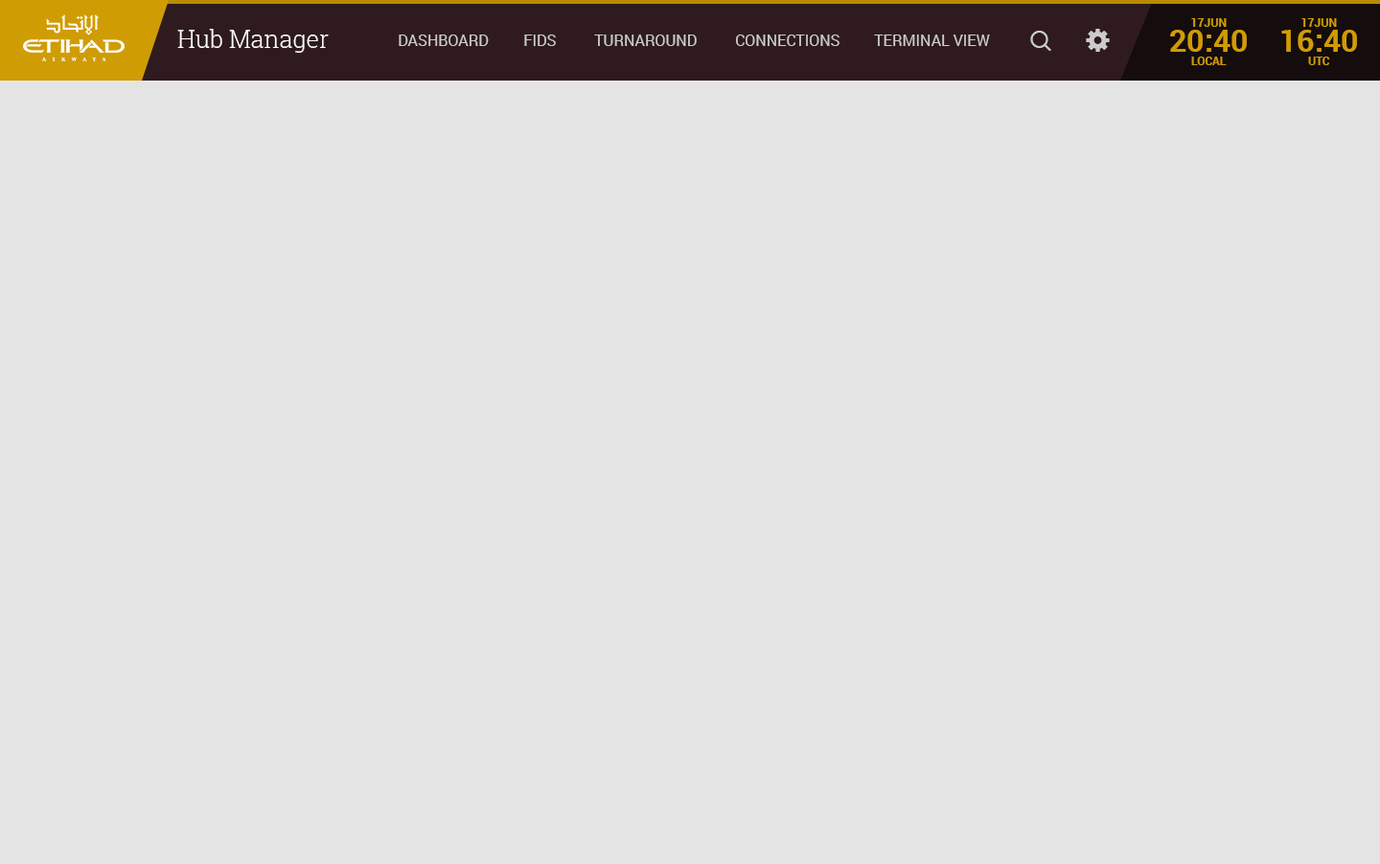
<style>
.page{position:relative;width:1380px;height:864px;background:#e4e4e4}
.page>*{position:absolute;margin:0}
.t1{font:24px "RobotoSlab-Light";color:#ffffff}
.t2{font:30.7px "Roboto-Bold";color:#d09c04}
.t3{font:11.5px "Roboto-Bold";color:#d09c04;text-transform:uppercase}
.t4{font:15.3px "Roboto-Regular";color:#cccccc;text-transform:uppercase}
.t5{font:11.5px "Roboto-Bold";color:#d09c04}
</style>
<div class="page">
<p class="t1" style="left:177px;top:29px;width:152px;height:24px">Hub Manager</p>
<p class="t2" style="left:1171px;top:30px;width:76px;height:22px">20:40</p>
<p class="t3" style="left:1192px;top:18px;width:35px;height:9px">17Jun</p>
<p class="t2" style="left:1282px;top:30px;width:75px;height:22px">16:40</p>
<p class="t3" style="left:1302px;top:18px;width:35px;height:9px">17Jun</p>
<p class="t4" style="left:399px;top:35px;width:90px;height:11px">Dashboard</p>
<p class="t4" style="left:524px;top:35px;width:32px;height:11px">FIDS</p>
<p class="t4" style="left:594px;top:35px;width:103px;height:11px">Turnaround</p>
<p class="t4" style="left:736px;top:35px;width:104px;height:11px">Connections</p>
<p class="t4" style="left:874px;top:35px;width:116px;height:11px">Terminal View</p>
<p class="t3" style="left:1192px;top:57px;width:35px;height:8px">local</p>
<p class="t5" style="left:1309px;top:57px;width:22px;height:8px">UTC</p>
</div>
